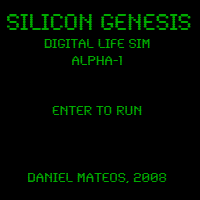
<style>
.page{position:relative;width:200px;height:200px;background:#000000}
.page>*{position:absolute;margin:0}
.t1{font:24px "SynchroLET";color:#00ab00}
.t2{font:14px "SynchroLET";color:#00ab00}
</style>
<div class="page">
<p class="t1" style="left:7px;top:14px;width:184px;height:16px">Silicon Genesis</p>
<p class="t2" style="left:27px;top:39px;width:140px;height:144px;text-align:center">Digital life sim<br>alpha-1<br><br><br>Enter to run<br><br><br><br>daniel mateos, 2008</p>
</div>
